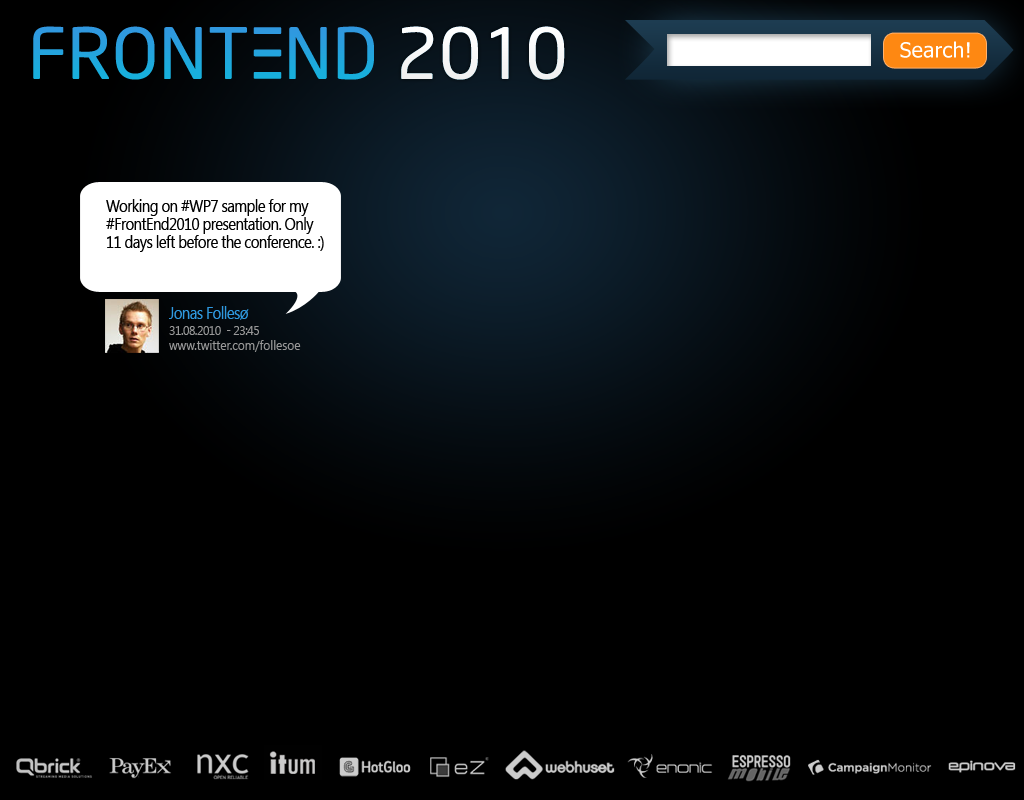
<style>
.page{position:relative;width:1024px;height:800px;background:#000000}
.page>*{position:absolute;margin:0}
.t1{font:21px "Tahoma";letter-spacing:0.02em;color:#ffffff}
.t2{font:16.8px "SegoeUI";letter-spacing:-0.04em;color:#010101;scale:0.89 1}
.t3{font:16.7px "SegoeUI";letter-spacing:-0.04em;color:#2f99df;scale:0.89 1}
.t4{font:13.3px/15px "SegoeUI";color:#989898;scale:0.89 1}
.t5{font:13.3px/15px "SegoeUI";letter-spacing:-0.04em;color:#989898;scale:0.89 1}
</style>
<div class="page">
<p class="t1" style="left:900px;top:41px;width:70px;height:17px">Search!</p>
<p class="t2" style="left:106px;top:199px;width:218px;height:53px">Working on #WP7 sample for my #FrontEnd2010 presentation. Only 11 days left before the conference. :)</p>
<p class="t3" style="left:169px;top:306px;width:80px;height:14px">Jonas Follesø</p>
<p class="t4" style="left:169px;top:326px;width:132px;height:26px"><span class="t5">31.08.2010  - 23:45<br></span>www.twitter.com/follesoe</p>
</div>
